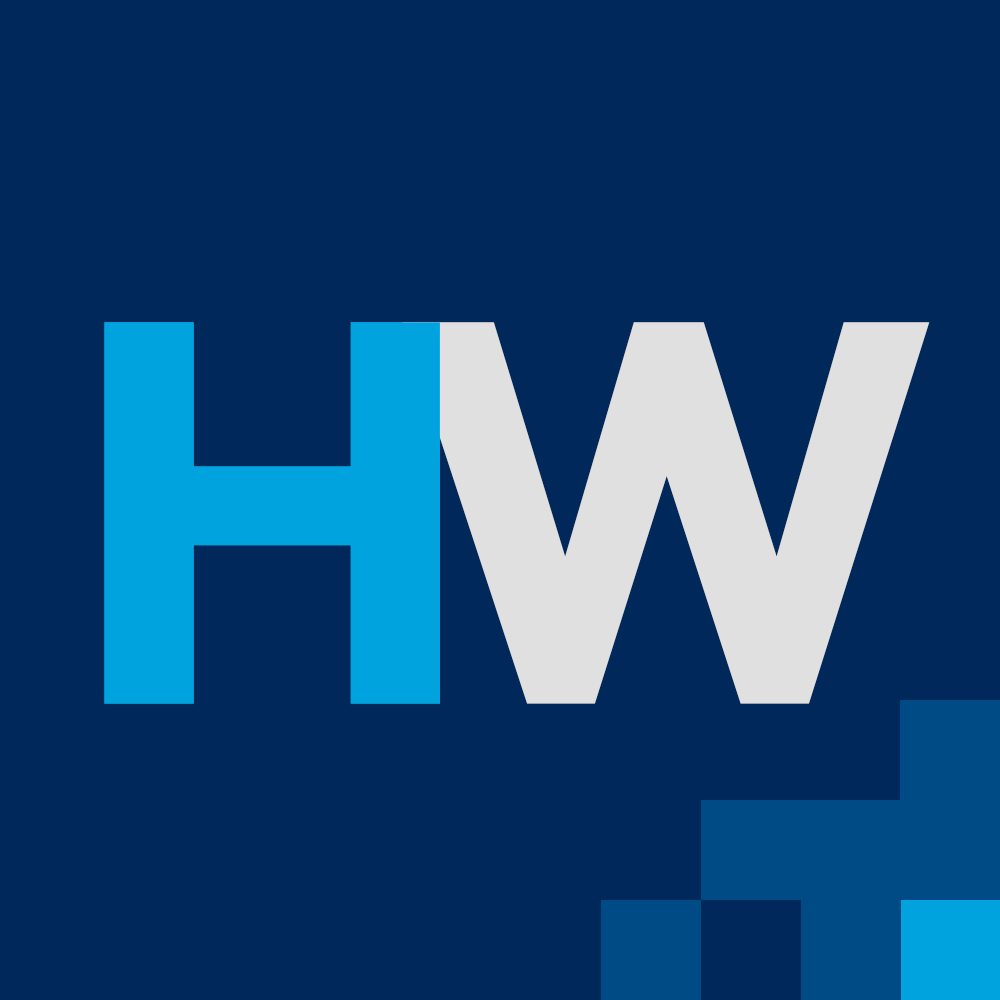
<style>
.page{position:relative;width:1000px;height:1000px;background:#00285a}
.page>*{position:absolute;margin:0}
.t1{font:520.8px "HarmonyOS_Sans_SC_Black";letter-spacing:-0.15em;color:#00a3dd}
.t2{font:520.8px "HarmonyOS_Sans_SC_Black";letter-spacing:-0.15em;color:#e0e0e0}
</style>
<div class="page">
<p class="t1" style="left:104px;top:322px;width:826px;height:382px">H<span class="t2">W</span></p>
<p class="t1" style="left:104px;top:322px;width:336px;height:382px">H</p>
</div>
